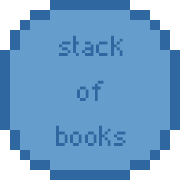
<style>
.page{position:relative;width:180px;height:180px;background:#659ecc}
.page>*{position:absolute;margin:0}
.t1{font:37.5px "Pixelade";color:#2f68a0}
</style>
<div class="page">
<p class="t1" style="left:56px;top:35px;width:70px;height:111px;text-align:center">stack<br>of<br>books</p>
</div>
